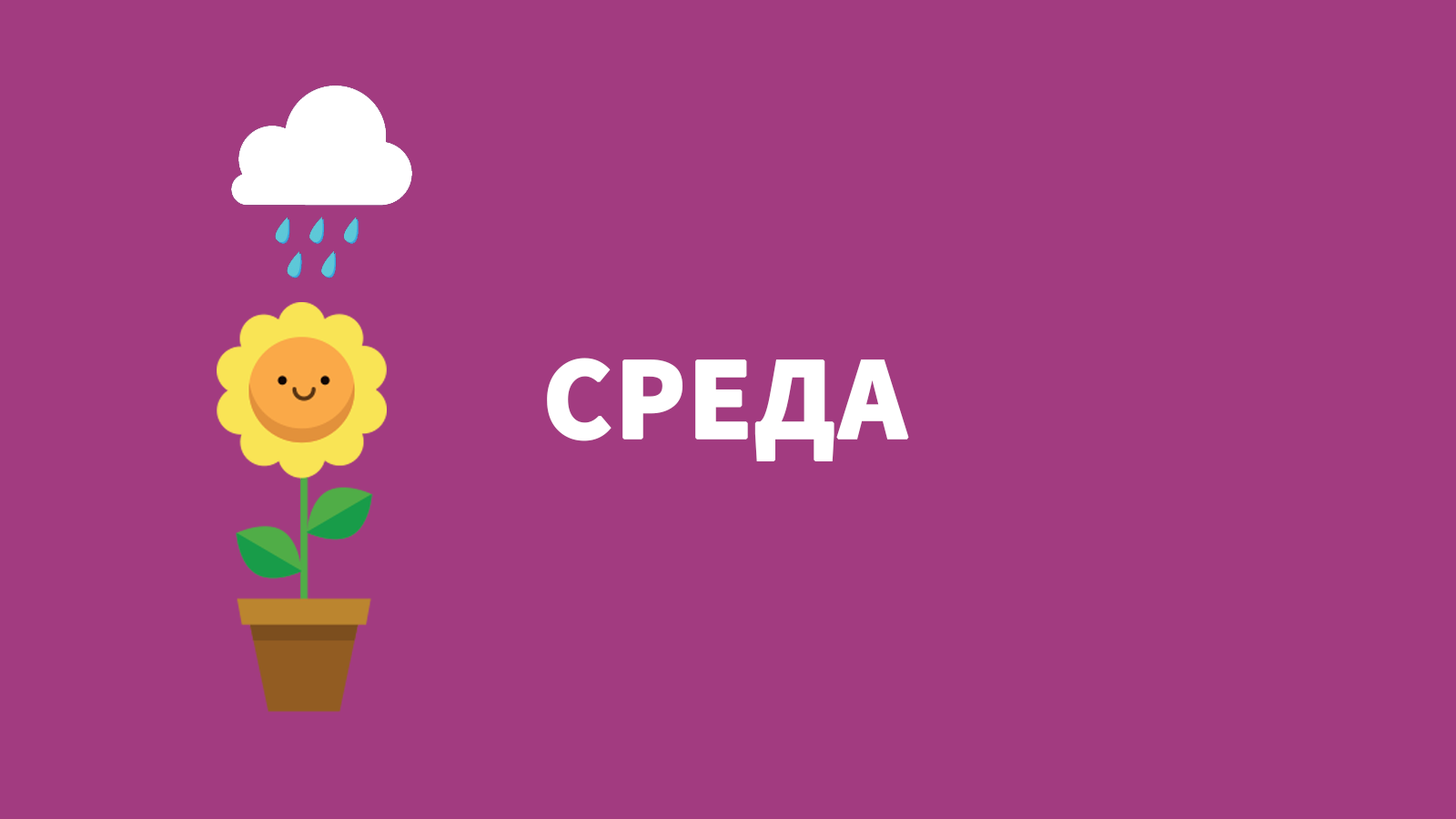
<style>
.page{position:relative;width:1456px;height:819px;background:#a23b80}
.page>*{position:absolute;margin:0}
.t1{font:117.4px "SourceSansPro-Bold";color:#ffffff;text-transform:uppercase;font-weight:bold}
</style>
<div class="page">
<p class="t1" style="left:547px;top:358px;width:362px;height:103px">среда</p>
</div>
